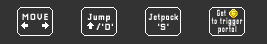
<style>
.page{position:relative;width:267px;height:44px;background:#333333}
.page>*{position:absolute;margin:0}
.t1{font:9px "Pixellari";letter-spacing:0.075em;color:#ffffff}
.t2{font:9px "Pixellari";letter-spacing:0.075em;color:#ffffff;scale:0.86 1}
.t3{font:9px/8.3px "Pixellari";letter-spacing:0.075em;color:#ffffff;scale:0.69 1}
</style>
<div class="page">
<p class="t1" style="left:22px;top:13px;width:26px;height:7px">MOVE</p>
<p class="t1" style="left:87px;top:13px;width:23px;height:9px">Jump</p>
<p class="t2" style="left:148px;top:13px;width:30px;height:9px">Jetpack</p>
<p class="t3" style="left:211px;top:9px;width:32px;height:25px;text-align:center">Get     <br>to trigger<br>portal</p>
<p class="t1" style="left:96px;top:23px;width:17px;height:7px">/'D'</p>
<p class="t1" style="left:158px;top:23px;width:11px;height:7px">'S'</p>
</div>
